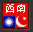
<style>
.page{position:relative;width:33px;height:32px;background:#333333}
.page>*{position:absolute;margin:0}
.t1{font:10.4px "SimSun";color:#ffffff}
</style>
<div class="page">
<p class="t1" style="left:6px;top:4px;width:19px;height:9px">西南</p>
</div>
